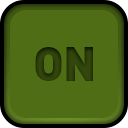
<style>
.page{position:relative;width:128px;height:128px;background:#4f6d14}
.page>*{position:absolute;margin:0}
.t1{font:48px "DIN-Black";color:#33470c}
</style>
<div class="page">
<p class="t1" style="left:35px;top:47px;width:58px;height:34px">ON</p>
</div>
